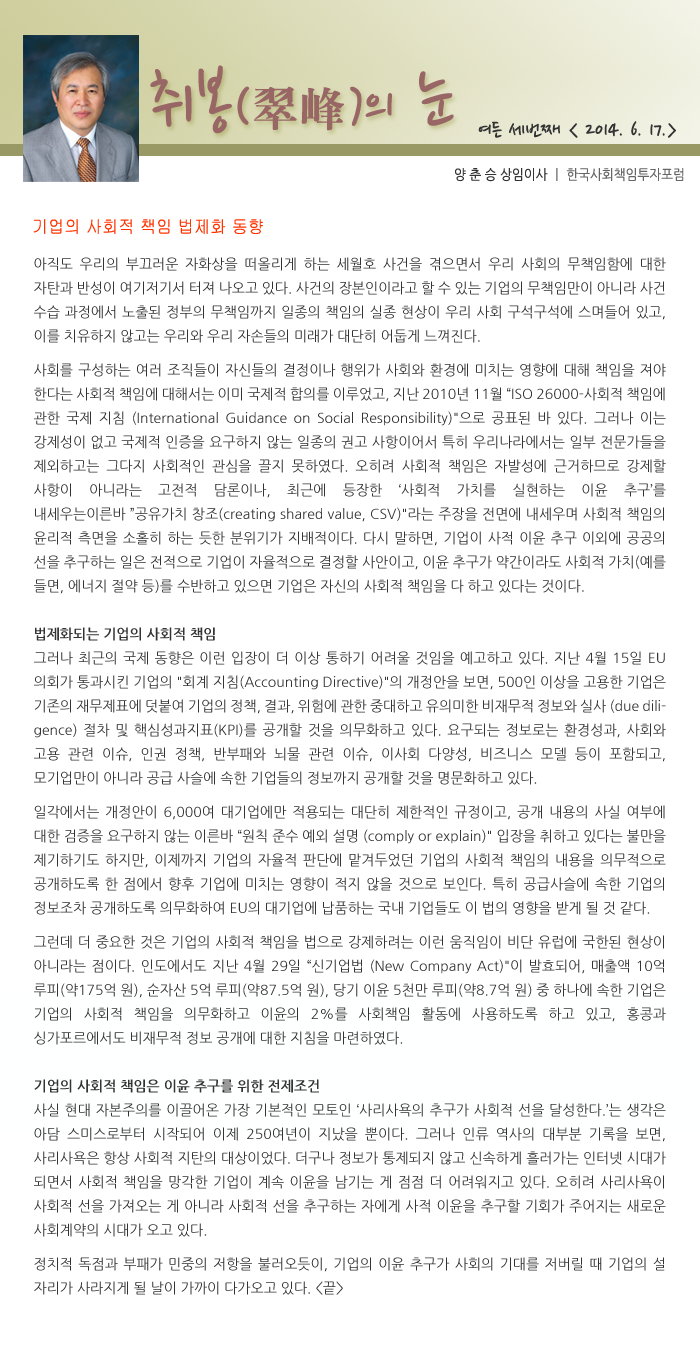
<style>
.page{position:relative;width:700px;height:1361px;background:#ffffff}
.page>*{position:absolute;margin:0}
.t1{font:77.5px "NanumPen";color:#996666}
.t2{font:60px "NanumPen";color:#996666}
.t3{font:48px "H2mjrE";color:#996666}
.t4{font:24px "NanumPen";color:#333333}
.t5{font:14px "NanumGothic";color:#666666;scale:0.9 1}
.t6{font:14px "NanumGothic";color:#333333;scale:0.9 1}
.t7{font:18px "Gulim";color:#ff3300;scale:0.9 1}
.t8{font:14px/24px "NanumGothic";color:#333333}
.t9{font:14px/10px "NanumGothic";color:#333333}
.t10{font:14px/24px "NanumGothicBold";color:#333333}
</style>
<div class="page">
<p class="t1" style="left:150px;top:65px;width:304px;height:69px">취봉<span class="t2">(</span><span class="t3">翠峰</span><span class="t2">)</span><span class="t2">의</span> 눈</p>
<p class="t4" style="left:478px;top:121px;width:198px;height:17px">여든 세번째 &lt; 2014. 6. 17.&gt;</p>
<p class="t5" style="left:455px;top:168px;width:229px;height:14px"><span class="t6">양 춘 승 상임이사 </span>ㅣ 한국사회책임투자포럼</p>
<p class="t7" style="left:33px;top:219px;width:230px;height:15px">기업의 사회적 책임 법제화 동향</p>
<p class="t8" style="left:34px;top:257px;width:632px;height:1038px;text-align:justify">아직도 우리의 부끄러운 자화상을 떠올리게 하는 세월호 사건을 겪으면서 우리 사회의 무책임함에 대한 자탄과 반성이 여기저기서 터져 나오고 있다. 사건의 장본인이라고 할 수 있는 기업의 무책임만이 아니라 사건 수습 과정에서 노출된 정부의 무책임까지 일종의 책임의 실종 현상이 우리 사회 구석구석에 스며들어 있고, 이를 치유하지 않고는 우리와 우리 자손들<span class="t9">의 미래가 대단히 어둡게 느껴진다.<br><br>사회를 구성하는 여러 조직들이 자신들의 결정이나 행위가 사회와 환경에 미</span>치는 영향에 대해 책임을 져야 한다는 사회적 책임에 대해서는 이미 국제적 합의를 이루었고, 지난 2010년 11월 “ISO 26000-사회적 책임에 관한 국제 지침 (International Guidance on Social Responsibility)"으로 공표된 바 있다. 그러나 이는 강제성이 없고 국제적 인증을 요구하지 않는 일종의 권고 사항이어서 특히 우리나라에서는 일부 전문가들을 제외하고는 그다지 사회적인 관심을 끌지 못하였다. 오히려 사회적 책임은 자발성에 근거하므로 강제할 사항이 아니라는 고전적 담론이나, 최근에 등장한 ‘사회적 가치를 실현하는 이윤 추구’를 내세우는이른바 ”공유가치 창조(creating shared value, CSV)"라는 주장을 전면에 내세우며 사회적 책임의 윤리적 측면을 소홀히 하는 듯한 분위기가 지배적이다. 다시 말하면, 기업이 사적 이윤 추구 이외에 공공의 선을 추구하는 일은 전적으로 기업이 자율적으로 결정할 사안이고, 이윤 추구가 약간이라도 사회적 가치(예를 들면, 에너지 절약 등)를 수반하고 있으면 기업은 자신의 사회적 책임을 다 하고 있다는 것이다.   <br><br><span class="t10">법제화되는 기업의 사회적 책임<br></span>그러나 최근의 국제 동향은 이런 입장이 더 이상 통하기 어려울 것임을 예고하고 있다. 지난 4월 15일 EU 의회가 통과시킨 기업의 "회계 지침(Accounting Directive)"의 개정안을 보면, 500인 이상을 고용한 기업은 기존의 재무제표에 덧붙여 기업의 정책, 결과, 위험에 관한 중대하고 유의미한 비재무적 정보와 실사 (due diligence) 절차 및 핵심성과지표(KPI)를 공개할 것을 의무화하고 있다. 요구되는 정보로는 환경성과, 사회와 고용 관련 이슈, 인권 정책, 반부패와 뇌물 관련 이슈, 이사회 다양성, 비즈니스 모델 등이 포함되고, 모기업만이 아니라 공급 <span class="t9">사슬에 속한 기업들의 정보까지 공개할 것을 명문화하고 있다.<br><br>일각에서는 개정안이 6,000여 대기업에만 </span>적용되는 대단히 제한적인 규정이고, 공개 내용의 사실 여부에 대한 검증을 요구하지 않는 이른바 “원칙 준수 예외 설명 (comply or explain)" 입장을 취하고 있다는 불만을 제기하기도 하지만, 이제까지 기업의 자율적 판단에 맡겨두었던 기업의 사회적 책임의 내용을 의무적으로 공개하도록 한 점에서 향후 기업에 미치는 영향이 적지 않을 것으로 보인다. 특히 공급사슬에 속한 기업의 정보조차 공개하도록 의무화하여 EU의 대기업에 납<span class="t9">품하는 국내 기업들도 이 법의 영향을 받게 될 것 같다.<br><br>그런데 더 중요한 것은 기업의 사회적 책임을 법으로 강제하려는 이런 움직임이 비단 유럽에</span> 국한된 현상이 아니라는 점이다. 인도에서도 지난 4월 29일 “신기업법 (New Company Act)"이 발효되어, 매출액 10억 루피(약175억 원), 순자산 5억 루피(약87.5억 원), 당기 이윤 5천만 루피(약8.7억 원) 중 하나에 속한 기업은 기업의 사회적 책임을 의무화하고 이윤의 2%를 사회책임 활동에 사용하도록 하고 있고, 홍콩과 싱가포르에서도 비재무적 정보 공개에 대한 지침을 마련하였다.<br><br><span class="t10">기업의 사회적 책임은 이윤 추구를 위한 전제조건<br></span>사실 현대 자본주의를 이끌어온 가장 기본적인 모토인 ‘사리사욕의 추구가 사회적 선을 달성한다.’는 생각은 아담 스미스로부터 시작되어 이제 250여년이 지났을 뿐이다. 그러나 인류 역사의 대부분 기록을 보면, 사리사욕은 항상 사회적 지탄의 대상이었다. 더구나 정보가 통제되지 않고 신속하게 흘러가는 인터넷 시대가 되면서 사회적 책임을 망각한 기업이 계속 이윤을 남기는 게 점점 더 어려워지고 있다. 오히려 사리사욕이 사회적 선을 가져오는 게 아니라 사회적 선을 추구하는 자에게 사적 이윤을 추구할 기회가 주어지는 새로운 사회<span class="t9">계약의 시대가 오고 있다.<br><br>정치적 독점과 부패가 </span>민중의 저항을 불러오듯이, 기업의 이윤 추구가 사회의 기대를 저버릴 때 기업의 설 자리가 사라지게 될 날이 가까이 다가오고 있다. &lt;끝&gt;</p>
</div>
